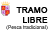
<style>
.page{position:relative;width:50px;height:33px;background:#ffffff}
.page>*{position:absolute;margin:0}
.t1{font:8.2px "ArialMT";color:#000000;font-weight:bold}
.t2{font:5px "ArialMT"}
</style>
<div class="page">
<p class="t1" style="left:16px;top:7px;width:32px;height:16px;text-align:right">TRAMO<br>LIBRE</p>
<p class="t2" style="left:6px;top:25px;width:42px;height:5px">(Pesca tradicional)</p>
</div>
